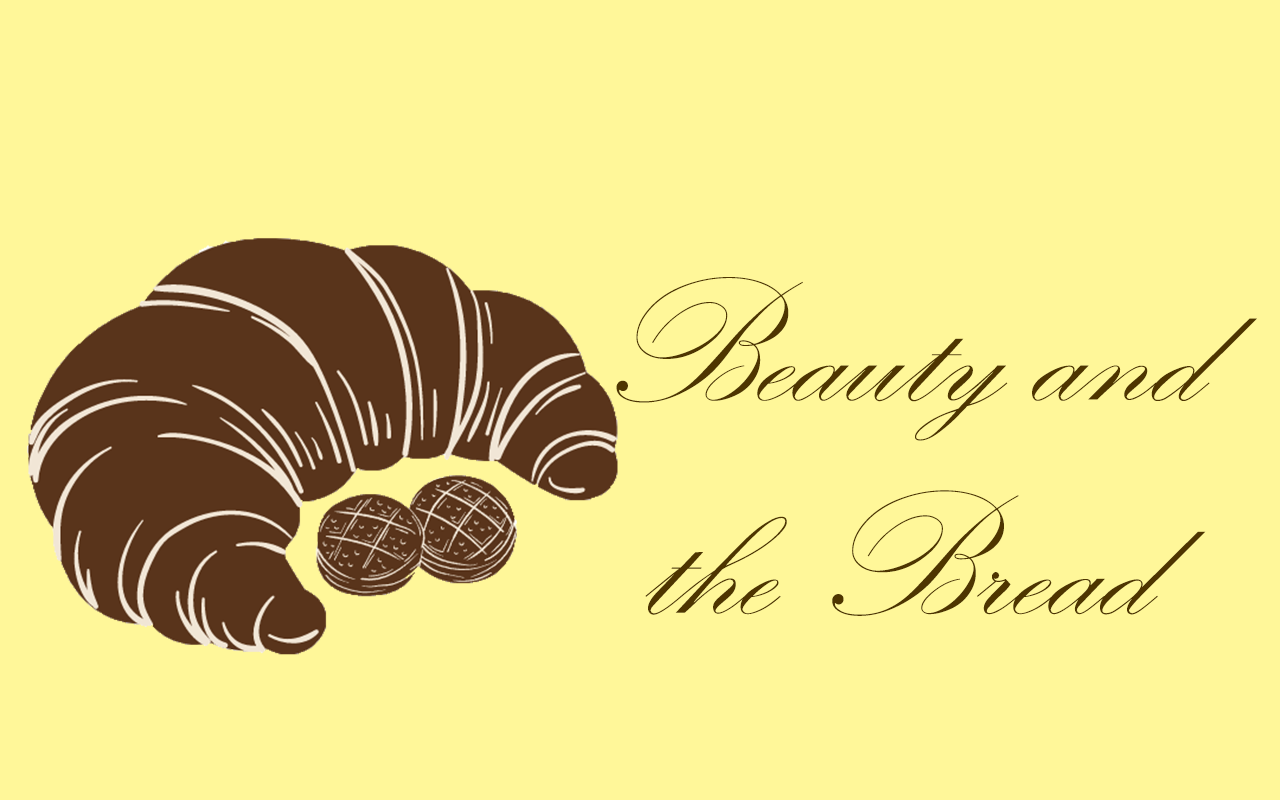
<style>
.page{position:relative;width:1280px;height:800px;background:#fff799}
.page>*{position:absolute;margin:0}
.t1{font:177.8px "KunstlerScript";color:#4e3500}
</style>
<div class="page">
<p class="t1" style="left:616px;top:277px;width:641px;height:339px;text-align:center">Beauty and<br>the Bread</p>
</div>
